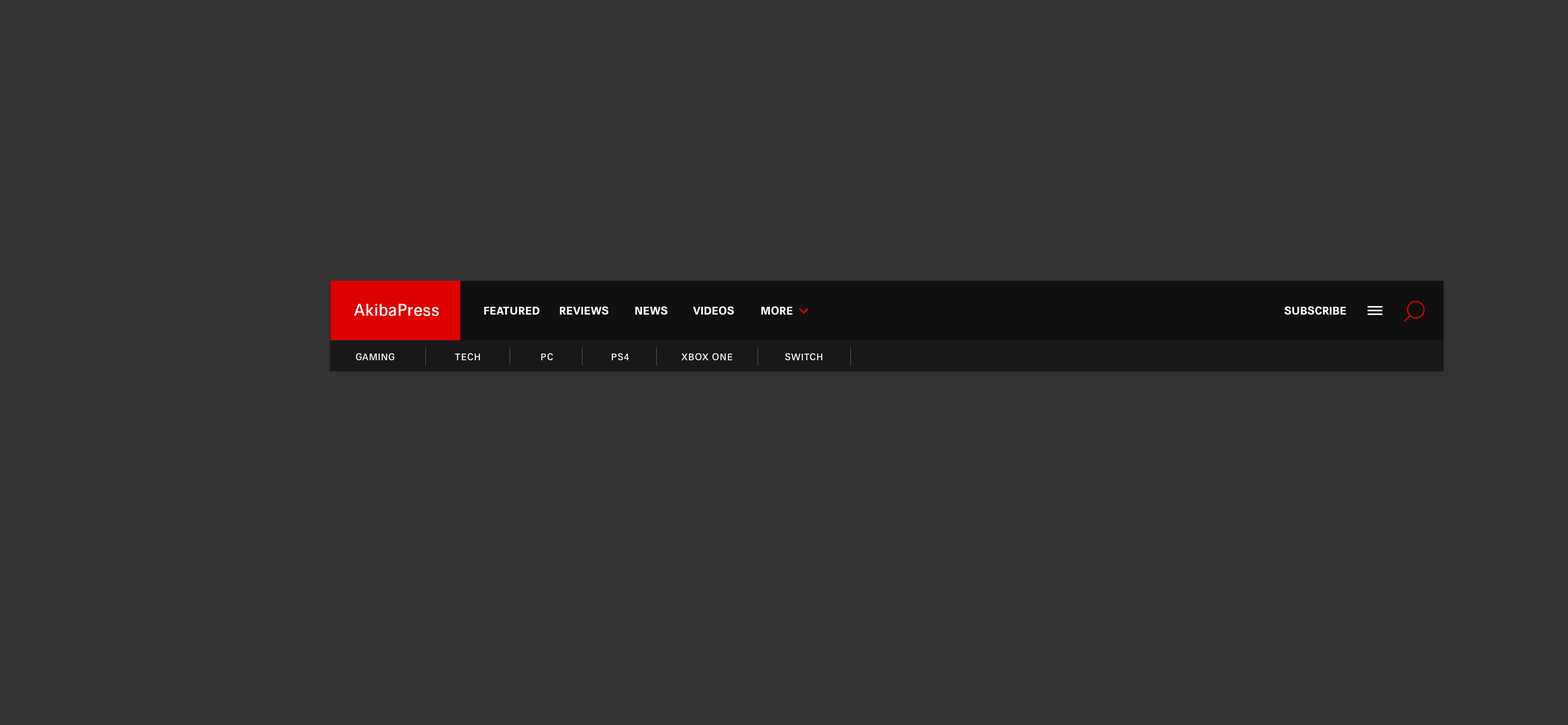
<style>
.page{position:relative;width:1568px;height:725px;background:#333333}
.page>*{position:absolute;margin:0}
.t1{font:17.1px "HansGrotesque-Medium";letter-spacing:0.02em;color:#ffffff}
.t2{font:11.1px "HansGrotesque-Bold";letter-spacing:0.02em;color:#ffffff;text-transform:uppercase}
.t3{font:9.7px "HansGrotesque-Medium";letter-spacing:0.06em;color:#ffffff;text-transform:uppercase}
</style>
<div class="page">
<p class="t1" style="left:354px;top:304px;width:85px;height:12px">AkibaPress</p>
<p class="t2" style="left:484px;top:307px;width:55px;height:7px">FEATURED</p>
<p class="t2" style="left:560px;top:306px;width:48px;height:8px">Reviews</p>
<p class="t2" style="left:635px;top:306px;width:32px;height:8px">News</p>
<p class="t2" style="left:693px;top:306px;width:41px;height:9px">Videos</p>
<p class="t2" style="left:761px;top:306px;width:32px;height:9px">more</p>
<p class="t2" style="left:1284px;top:306px;width:62px;height:8px">subscribe</p>
<p class="t3" style="left:356px;top:353px;width:38px;height:7px">gaming</p>
<p class="t3" style="left:455px;top:353px;width:25px;height:7px">tech</p>
<p class="t3" style="left:541px;top:353px;width:12px;height:7px">pc</p>
<p class="t3" style="left:612px;top:353px;width:17px;height:7px">ps4</p>
<p class="t3" style="left:682px;top:353px;width:50px;height:7px">xbox one</p>
<p class="t3" style="left:785px;top:353px;width:37px;height:7px">switch</p>
</div>
